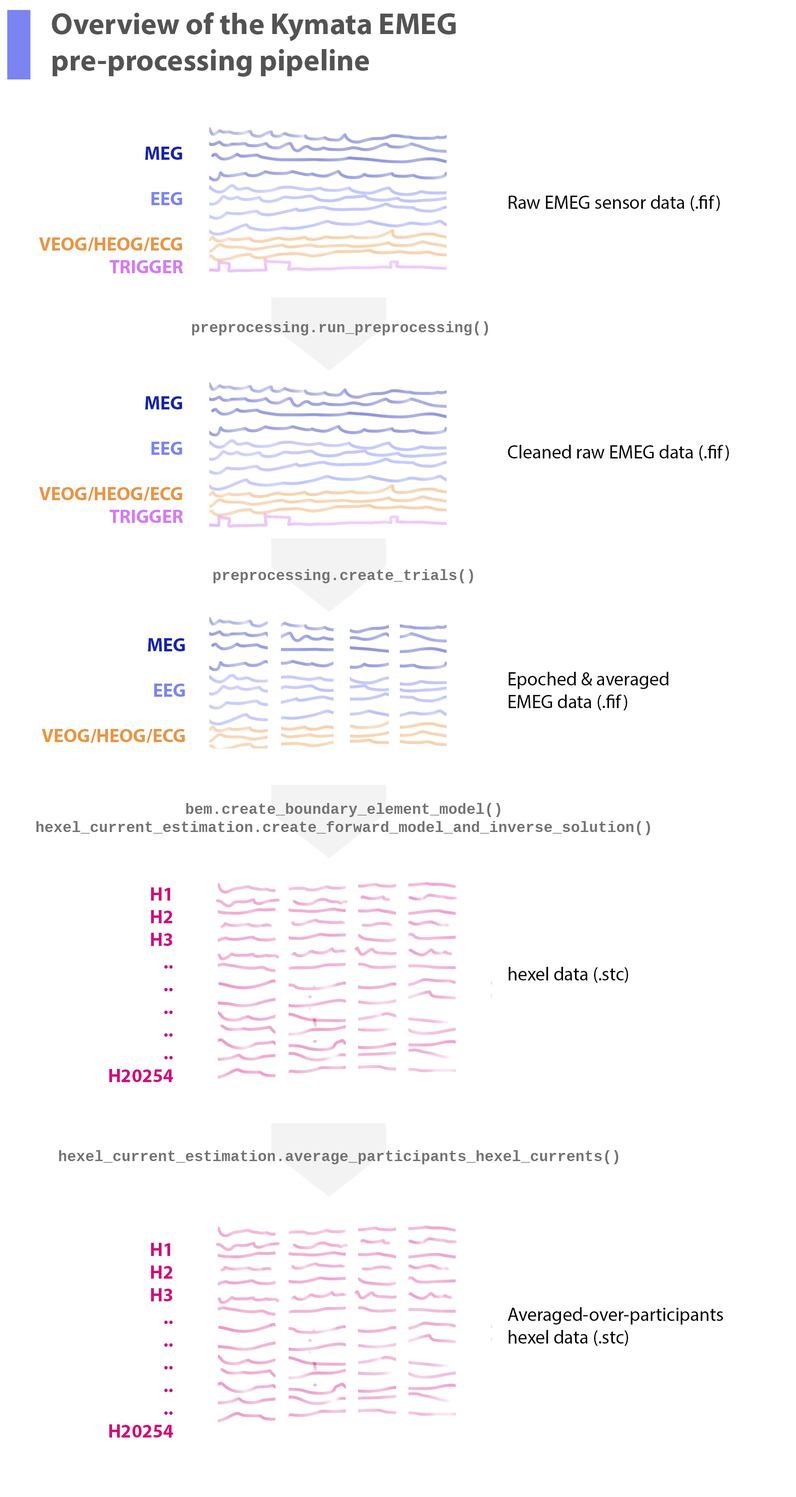
<style>
.page{position:relative;width:796px;height:1497px;background:#ffffff}
.page>*{position:absolute;margin:0}
.t1{font:30.3px "MyriadPro-Bold";color:#535353}
.t2{font:18.9px "MyriadPro-Bold";color:#e99544}
.t3{font:18.9px "MyriadPro-Bold";color:#1523af}
.t4{font:18.9px "MyriadPro-Bold";color:#7a85f1}
.t5{font:18.9px "MyriadPro-Bold";color:#d67af1}
.t6{font:18.9px "MyriadPro-Regular";color:#000000}
.t7{font:15.1px "CousineForPowerline-Bold";color:#737171}
.t8{font:18.9px "MyriadPro-Bold";color:#ce0e7a}
</style>
<div class="page">
<p class="t1" style="left:52px;top:12px;width:404px;height:65px">Overview of the Kymata EMEG<br>pre-processing pipeline</p>
<p class="t2" style="left:39px;top:147px;width:144px;height:126px;text-align:right"><span class="t3">MEG<br></span><span class="t4"><br>EEG<br></span><br>VEOG/HEOG/ECG<br><span class="t5">TRIGGER</span></p>
<p class="t6" style="left:508px;top:195px;width:221px;height:1151px">Raw EMEG sensor data (.fif)<br><br><br><br><br><br><br><br><br><br><br>Cleaned raw EMEG data (.fif)<br><br><br><br><br><br><br><br><br><br>Epoched &amp; averaged<br>EMEG data (.fif)<br><br><br><br><br><br><br><br><br><br><br><br>hexel data (.stc)<br><br><br><br><br><br><br><br><br><br><br><br><br><br><br>Averaged-over-participants<br>hexel data (.stc)</p>
<p class="t7" style="left:192px;top:321px;width:297px;height:15px">preprocessing.run_preprocessing()</p>
<p class="t2" style="left:39px;top:396px;width:144px;height:127px;text-align:right"><span class="t3">MEG<br></span><span class="t4"><br>EEG<br></span><br>VEOG/HEOG/ECG<br><span class="t5">TRIGGER</span></p>
<p class="t7" style="left:213px;top:569px;width:261px;height:14px">preprocessing.create_trials()</p>
<p class="t2" style="left:42px;top:638px;width:143px;height:105px;text-align:right"><span class="t3">MEG<br></span><span class="t4"><br>EEG<br></span><br>VEOG/HEOG/ECG</p>
<p class="t7" style="left:36px;top:803px;width:615px;height:32px;text-align:center">bem.create_boundary_element_model()<br>hexel_current_estimation.create_forward_model_and_inverse_solution()</p>
<p class="t8" style="left:109px;top:888px;width:64px;height:194px;text-align:right">H1<br>H2<br>H3<br>..<br>..<br>..<br>..<br>..<br>H20254</p>
<p class="t7" style="left:59px;top:1150px;width:560px;height:15px">hexel_current_estimation.average_participants_hexel_currents()</p>
<p class="t8" style="left:109px;top:1243px;width:64px;height:195px;text-align:right">H1<br>H2<br>H3<br>..<br>..<br>..<br>..<br>..<br>H20254</p>
</div>
